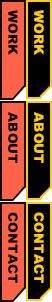
<style>
.page{position:relative;width:52px;height:302px;background:#000000}
.page>*{position:absolute;margin:0}
.t1{font:13px "Arial-Black";color:#000000;text-transform:uppercase}
.t2{font:13px "Arial-Black";color:#ffcc00;text-transform:uppercase}
</style>
<div class="page">
<p class="t1" style="left:8px;top:10px;width:10px;height:45px;rotate:90deg">WORK</p>
<p class="t2" style="left:34px;top:10px;width:10px;height:45px;rotate:90deg">WORK</p>
<p class="t1" style="left:8px;top:112px;width:10px;height:51px;rotate:90deg">ABOUT</p>
<p class="t2" style="left:34px;top:112px;width:10px;height:51px;rotate:90deg">ABOUT</p>
<p class="t1" style="left:8px;top:212px;width:10px;height:71px;rotate:90deg">CONTACT</p>
<p class="t2" style="left:34px;top:212px;width:10px;height:71px;rotate:90deg">CONTACT</p>
</div>
